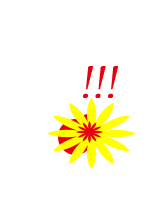
<style>
.page{position:relative;width:164px;height:209px;background:#ffffff}
.page>*{position:absolute;margin:0}
.t1{font:48.6px "FZBWKSJW--GB1-0";color:#e60012;font-style:italic}
</style>
<div class="page">
<p class="t1" style="left:82px;top:66px;width:37px;height:32px">!!!</p>
</div>
